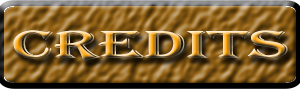
<style>
.page{position:relative;width:300px;height:89px}
.page>*{position:absolute;margin:0}
.t1{font:40.4px "Algerian";color:#ffa200;scale:1.76 1}
</style>
<div class="page">
<p class="t1" style="left:13px;top:30px;width:275px;height:31px">Credits</p>
</div>
